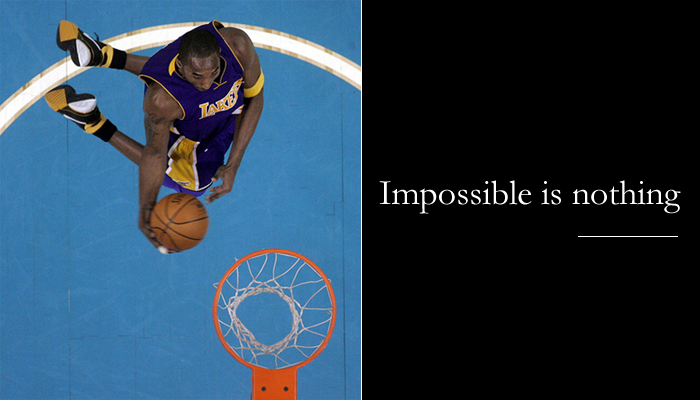
<style>
.page{position:relative;width:700px;height:400px;background:#000000}
.page>*{position:absolute;margin:0}
.t1{font:36px "Garamond";color:#ffffff}
</style>
<div class="page">
<p class="t1" style="left:379px;top:180px;width:302px;height:34px">Impossible is nothing</p>
</div>
